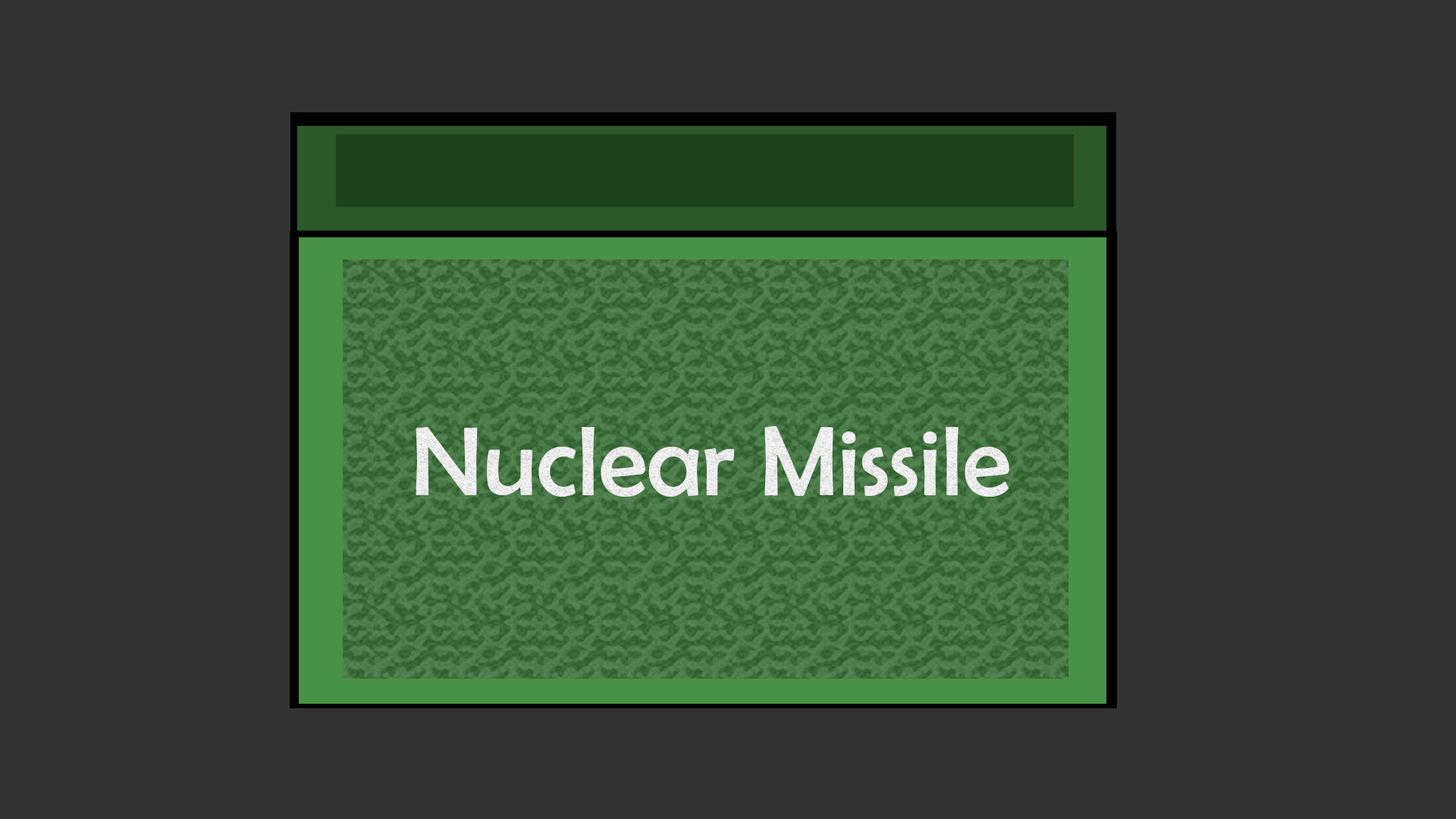
<style>
.page{position:relative;width:1456px;height:819px;background:#333333}
.page>*{position:absolute;margin:0}
.t1{font:99.3px "BerlinSansFB-Reg";color:#ffffff}
</style>
<div class="page">
<p class="t1" style="left:416px;top:426px;width:593px;height:71px">Nuclear Missile</p>
</div>
